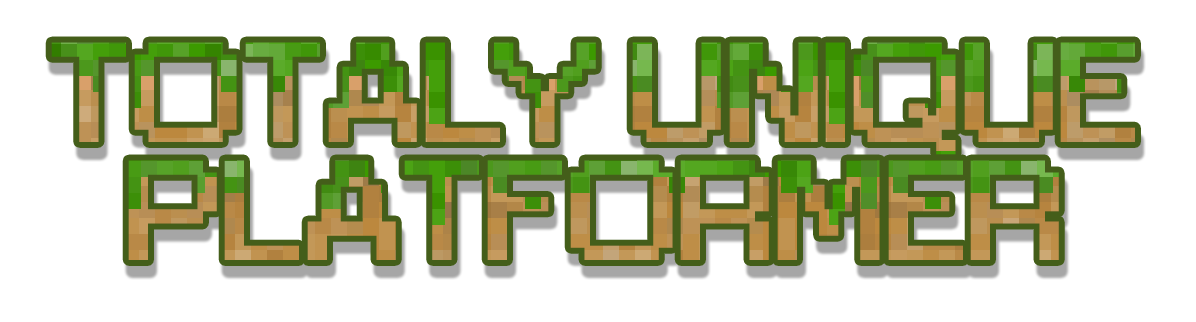
<style>
.page{position:relative;width:1196px;height:322px;background:#ffffff}
.page>*{position:absolute;margin:0}
.t1{font:130.1px/117.6px "Small Fonts";font-weight:bold;scale:1.35 1}
</style>
<div class="page">
<p class="t1" style="left:51px;top:42px;width:1084px;height:218px;text-align:center">TOTALY UNIQUE<br>PLATFORMER</p>
</div>
